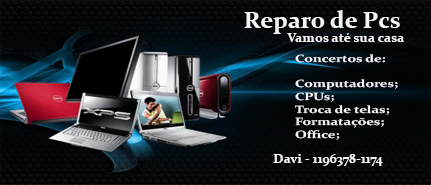
<style>
.page{position:relative;width:431px;height:185px}
.page>*{position:absolute;margin:0}
.t1{font:24px "Constantia-Bold";color:#f7f4f9}
.t2{font:13.3px "Constantia-Bold";color:#f7f4f9}
.t3{font:10.6px "Constantia-Bold";color:#f7f4f9;scale:1.34 1}
</style>
<div class="page">
<p class="t1" style="left:244px;top:10px;width:156px;height:24px">Reparo de Pcs</p>
<p class="t2" style="left:287px;top:33px;width:117px;height:9px">Vamos até sua casa</p>
<p class="t3" style="left:295px;top:54px;width:103px;height:86px">Concertos de:<br><br>Computadores;<br>CPUs;<br>Troca de telas;<br>Formatações;<br>Office;</p>
<p class="t2" style="left:273px;top:154px;width:110px;height:12px">Davi - 1196378-1174</p>
</div>
